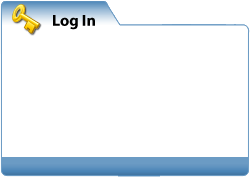
<style>
.page{position:relative;width:250px;height:177px;background:#ffffff}
.page>*{position:absolute;margin:0}
.t1{font:16px "MyriadPro-Bold";color:#000000}
</style>
<div class="page">
<p class="t1" style="left:53px;top:15px;width:42px;height:15px">Log In</p>
</div>
